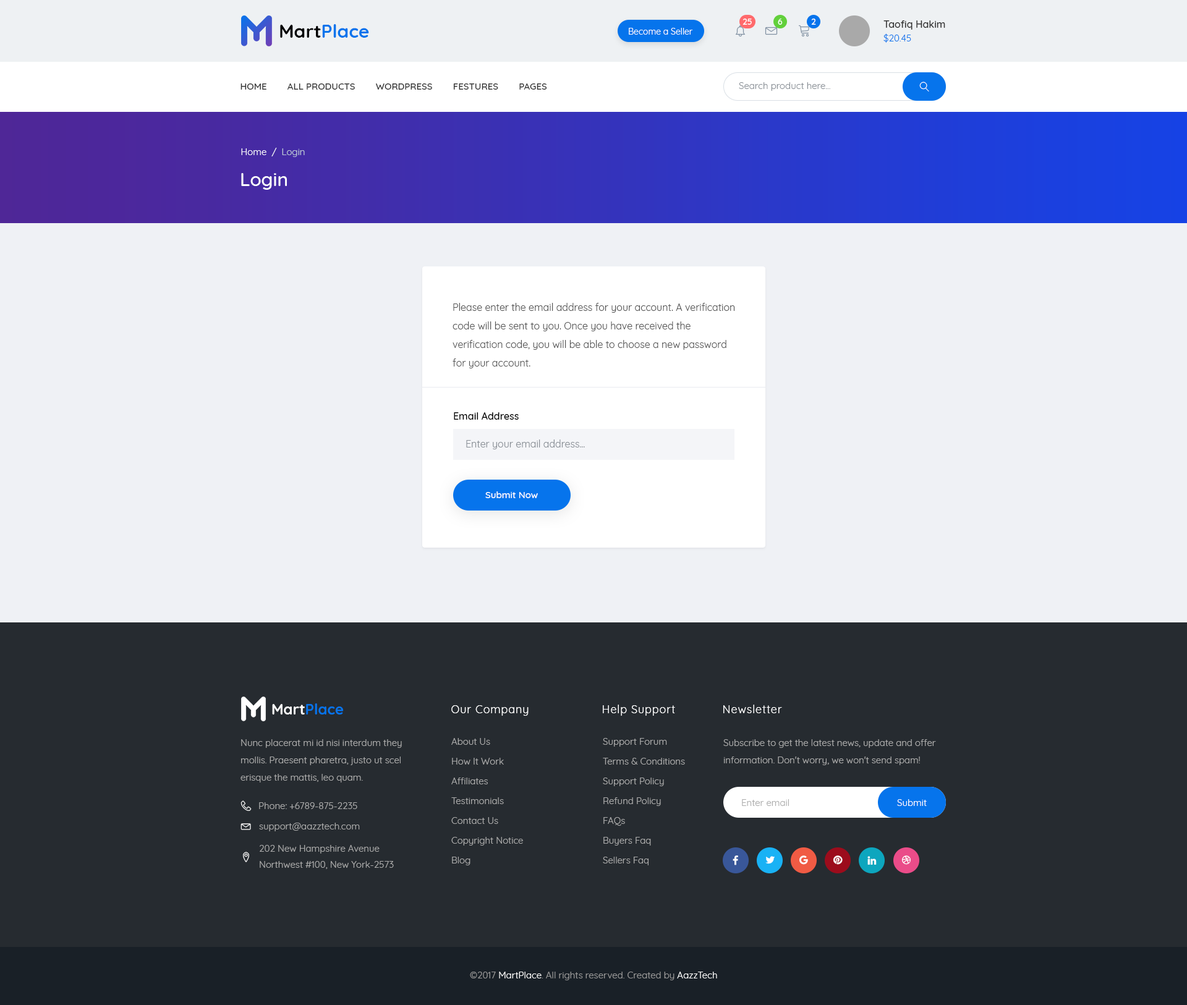
<style>
.page{position:relative;width:1187px;height:1005px;background:#eff1f5}
.page>*{position:absolute;margin:0}
.t1{font:18.5px "Quicksand-Bold";color:#0674ec}
.t2{font:18.5px "Quicksand-Bold";color:#000000}
.t3{font:8.7px "Quicksand-Regular";color:#ffffff}
.t4{font:8.7px "Quicksand-Medium";color:#ffffff;text-transform:uppercase}
.t5{font:9.9px/13.6px "Quicksand-Medium";color:#333333}
.t6{font:9.3px/13.6px "Quicksand-Regular";color:#0674ec}
.t7{font:9.3px "Quicksand-Medium";color:#333333;text-transform:uppercase}
.t8{font:9.3px "Quicksand-Regular";color:#898f96}
.t9{font:9.3px "Quicksand-Regular";color:#ffffff}
.t10{font:9.3px "Quicksand-Regular";color:#bfcad7}
.t11{font:18.5px "Quicksand-Medium";color:#ffffff}
.t12{font:9.9px/18.5px "Quicksand-Regular";color:#555555}
.t13{font:9.9px "Quicksand-Medium";color:#000000}
.t14{font:9.9px "Quicksand-Regular";color:#898f96}
.t15{font:9.3px "Quicksand-Medium";color:#ffffff}
.t16{font:14.8px "Quicksand-Bold";color:#0674ec}
.t17{font:14.8px "Quicksand-Bold";color:#ffffff}
.t18{font:11.1px "Quicksand-Regular";letter-spacing:0.05em;color:#ffffff}
.t19{font:9.3px/19.8px "Quicksand-Regular";color:#ababab}
.t20{font:9.3px/17.3px "Quicksand-Regular";color:#ababab}
.t21{font:9.3px "Quicksand-Regular";color:#ababab}
.t22{font:9.3px/16.1px "Quicksand-Regular";color:#ababab}
.t23{font:9.3px "Quicksand-Regular";color:#999999}
</style>
<div class="page">
<p class="t1" style="left:280px;top:24px;width:89px;height:14px"><span class="t2">Mart</span>Place</p>
<p class="t3" style="left:629px;top:28px;width:64px;height:7px">Become a Seller</p>
<p class="t4" style="left:742px;top:19px;width:10px;height:6px">25</p>
<p class="t4" style="left:777px;top:19px;width:5px;height:6px">6</p>
<p class="t4" style="left:811px;top:19px;width:5px;height:6px">2</p>
<p class="t5" style="left:883px;top:20px;width:62px;height:23px">Taofiq Hakim<br><span class="t6">$20.45</span></p>
<p class="t7" style="left:240px;top:83px;width:307px;height:7px">HOME        all products        wordpress        festures        Pages</p>
<p class="t8" style="left:739px;top:82px;width:91px;height:9px">Search product here...</p>
<p class="t9" style="left:241px;top:148px;width:64px;height:9px">Home  /  <span class="t10">Login</span></p>
<p class="t11" style="left:241px;top:173px;width:46px;height:17px">Login</p>
<p class="t12" style="left:452px;top:303px;width:283px;height:65px">Please enter the email address for your account. A verification<br>code will be sent to you. Once you have received the <br>verification code, you will be able to choose a new password <br>for your account.</p>
<p class="t13" style="left:454px;top:412px;width:65px;height:8px">Email Address</p>
<p class="t14" style="left:466px;top:439px;width:119px;height:10px">Enter your email address...</p>
<p class="t15" style="left:485px;top:491px;width:53px;height:7px">Submit Now</p>
<p class="t16" style="left:272px;top:703px;width:72px;height:11px"><span class="t17">Mart</span>Place</p>
<p class="t18" style="left:451px;top:705px;width:77px;height:11px">Our Company</p>
<p class="t18" style="left:603px;top:705px;width:72px;height:11px">Help Support</p>
<p class="t18" style="left:723px;top:705px;width:59px;height:8px">Newsletter</p>
<p class="t19" style="left:451px;top:738px;width:72px;height:127px">About Us<br>How It Work<br>Affiliates<br>Testimonials<br>Contact Us<br>Copyright Notice<br>Blog</p>
<p class="t19" style="left:603px;top:738px;width:82px;height:127px">Support Forum<br>Terms &amp; Conditions<br>Support Policy<br>Refund Policy<br>FAQs<br>Buyers Faq<br>Sellers Faq</p>
<p class="t20" style="left:240px;top:739px;width:162px;height:43px">Nunc placerat mi id nisi interdum they mollis. Praesent pharetra, justo ut scel erisque the mattis, leo quam.</p>
<p class="t20" style="left:723px;top:739px;width:213px;height:26px">Subscribe to get the latest news, update and offer information. Don't worry, we won't send spam!</p>
<p class="t21" style="left:259px;top:802px;width:98px;height:7px">Phone: +6789-875-2235</p>
<p class="t21" style="left:742px;top:799px;width:47px;height:7px">Enter email</p>
<p class="t9" style="left:897px;top:799px;width:29px;height:7px">Submit</p>
<p class="t21" style="left:259px;top:823px;width:101px;height:8px">support@aazztech.com</p>
<p class="t22" style="left:260px;top:845px;width:134px;height:24px">202 New Hampshire Avenue<br>Northwest #100, New York-2573</p>
<p class="t23" style="left:470px;top:972px;width:247px;height:8px">©2017 <span class="t9">MartPlace</span>. All rights reserved. Created by <span class="t9">AazzTech</span></p>
</div>
